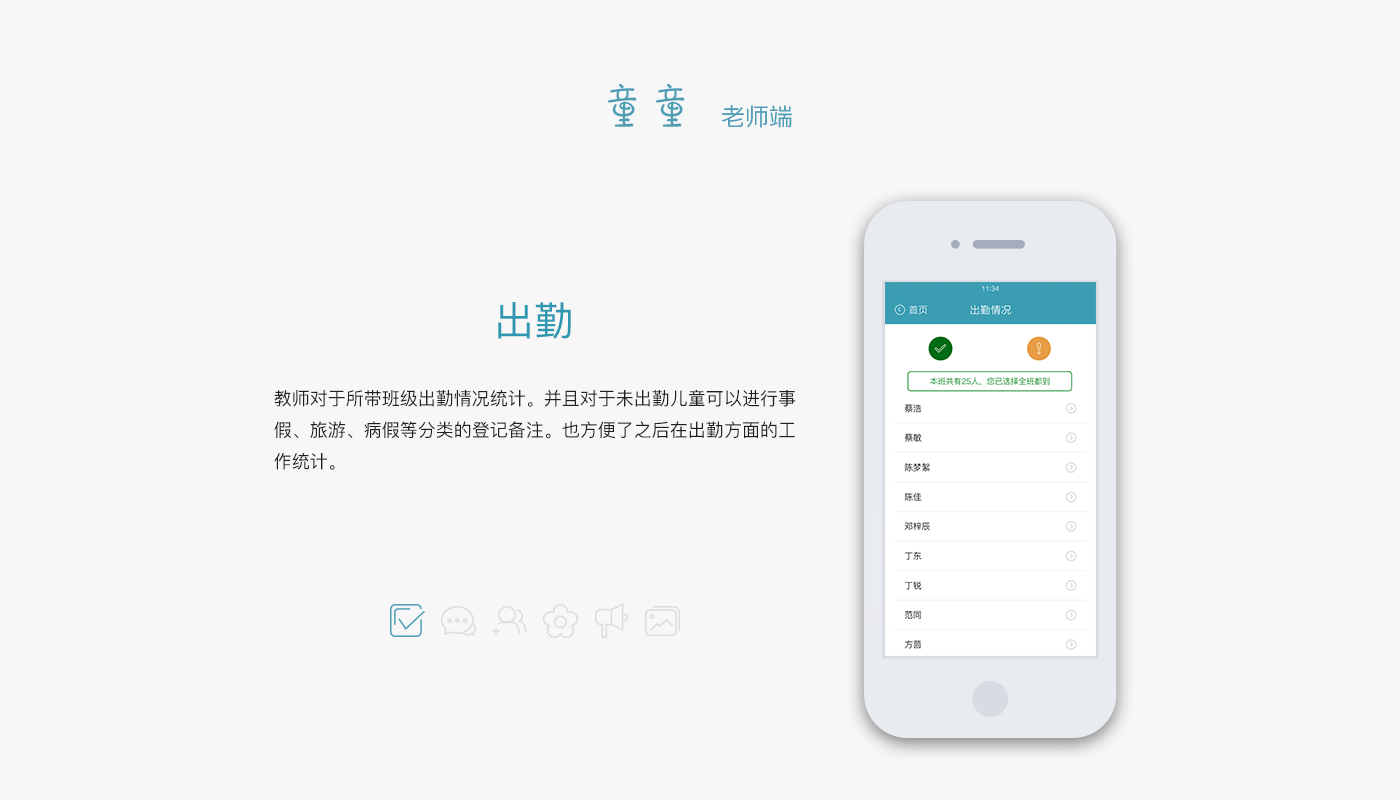
<style>
.page{position:relative;width:1400px;height:800px;background:#f7f7f8}
.page>*{position:absolute;margin:0}
.t1{font:48px "DFPao-W4-WIN-BF";color:#4d9eb5}
.t2{font:24px "PingFangSC-Regular";color:#4d9eb5}
.t3{font:40px "PingFangSC-Regular";color:#2d98af}
.t4{font:18px "PingFangSC-Regular";color:#202020}
</style>
<div class="page">
<p class="t1" style="left:608px;top:84px;width:77px;height:43px">童童</p>
<p class="t2" style="left:722px;top:105px;width:70px;height:23px">老师端</p>
<p class="t3" style="left:498px;top:302px;width:73px;height:37px">出勤</p>
<p class="t4" style="left:274px;top:389px;width:522px;height:81px">教师对于所带班级出勤情况统计。并且对于未出勤儿童可以进行事<br>假、旅游、病假等分类的登记备注。也方便了之后在出勤方面的工<br>作统计。</p>
</div>
